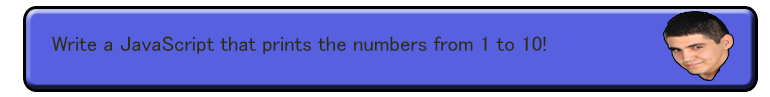
<style>
.page{position:relative;width:770px;height:97px;background:#5760df}
.page>*{position:absolute;margin:0}
.t1{font:21px "MS-PGothic";color:#2e2e0c}
</style>
<div class="page">
<p class="t1" style="left:52px;top:36px;width:494px;height:18px">Write a JavaScript that prints the numbers from 1 to 10!</p>
</div>
